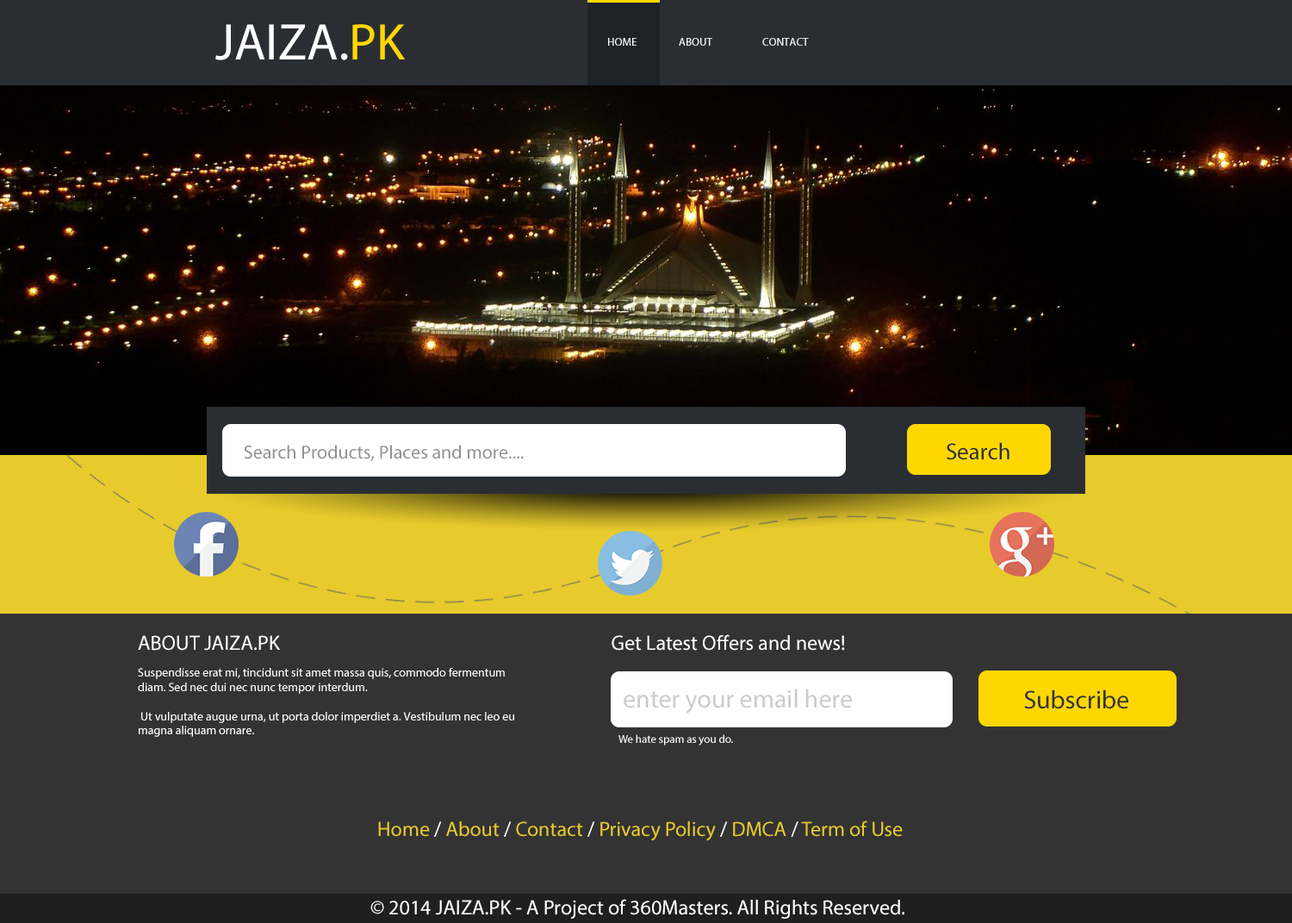
<style>
.page{position:relative;width:1292px;height:923px;background:#333333}
.page>*{position:absolute;margin:0}
.t1{font:51.7px "MyriadPro-Regular";color:#ffffff}
.t2{font:51.7px "MyriadPro-Regular";color:#ffd700}
.t3{font:11.2px "MyriadPro-Regular";color:#ffffff;text-transform:uppercase}
.t4{font:19px "MyriadPro-Regular";color:#919191}
.t5{font:23.3px "MyriadPro-Regular";color:#2a2e33}
.t6{font:12.1px "MyriadPro-Regular";color:#ffffff}
.t7{font:20.7px "MyriadPro-Regular";color:#ffffff}
.t8{font:25.8px "MyriadPro-Regular";color:#cccccc}
.t9{font:25.8px "MyriadPro-Regular";color:#333333}
.t10{font:11.2px "MyriadPro-Regular";color:#ffffff}
.t11{font:20.7px "MyriadPro-Regular";color:#e7cb2c}
</style>
<div class="page">
<p class="t1" style="left:215px;top:24px;width:190px;height:36px">JAIZA.<span class="t2">PK</span></p>
<p class="t3" style="left:608px;top:38px;width:201px;height:8px">Home      About  Contact</p>
<p class="t4" style="left:244px;top:445px;width:280px;height:16px">Search Products, Places and more....</p>
<p class="t5" style="left:947px;top:442px;width:63px;height:18px">Search</p>
<p class="t6" style="left:138px;top:635px;width:376px;height:102px"><span class="t7">ABOUT JAIZA.PK<br><br></span>Suspendisse erat mi, tincidunt sit amet massa quis, commodo fermentum diam. Sed nec dui nec nunc tempor interdum. <br><br> Ut vulputate augue urna, ut porta dolor imperdiet a. Vestibulum nec leo eu magna aliquam ornare.</p>
<p class="t7" style="left:612px;top:634px;width:233px;height:16px">Get Latest Offers and news!</p>
<p class="t8" style="left:624px;top:688px;width:228px;height:25px">enter your email here</p>
<p class="t9" style="left:1024px;top:689px;width:105px;height:20px">Subscribe</p>
<p class="t10" style="left:619px;top:734px;width:114px;height:11px">We hate spam as you do.</p>
<p class="t11" style="left:378px;top:820px;width:525px;height:21px">Home<span class="t7"> / </span>About <span class="t7">/ </span>Contact <span class="t7">/ </span>Privacy Policy<span class="t7"> / </span>DMCA<span class="t7"> / </span>Term of Use</p>
<p class="t7" style="left:370px;top:899px;width:535px;height:19px">© 2014 JAIZA.PK - A Project of 360Masters. All Rights Reserved.</p>
</div>
